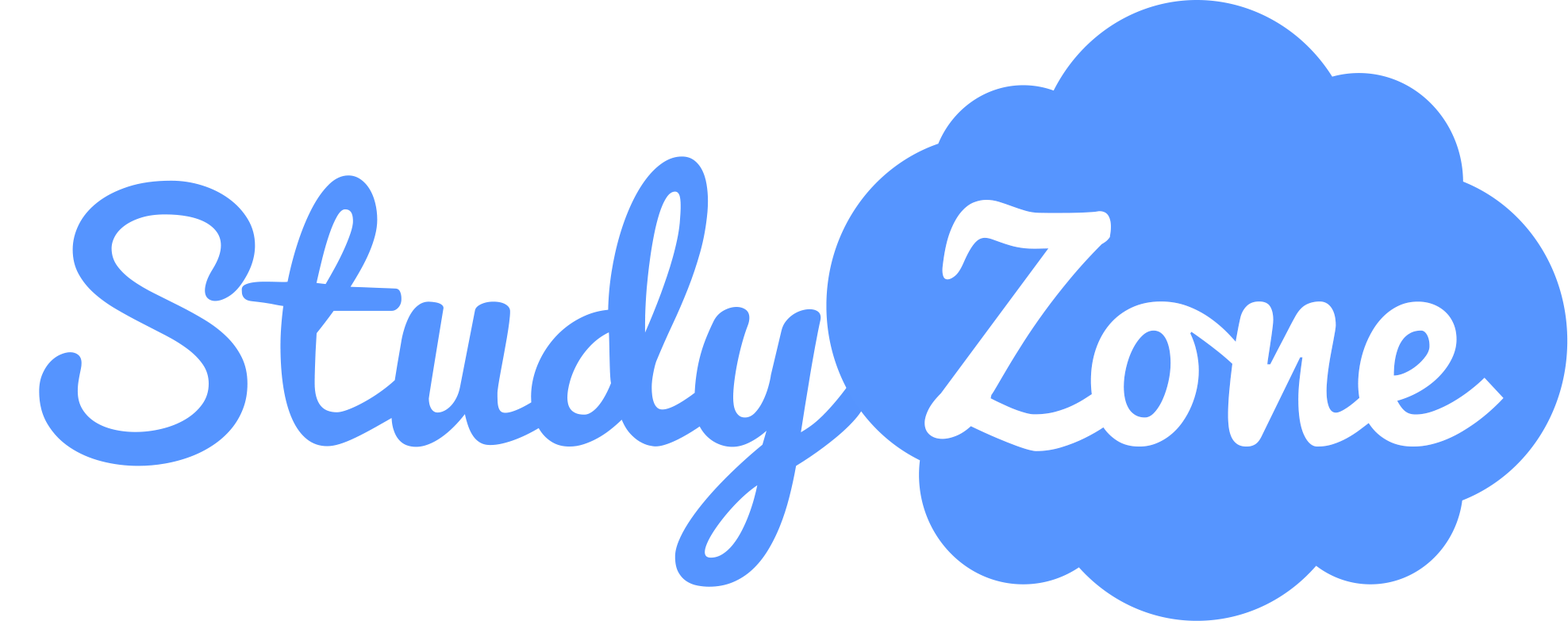
<style>
.page{position:relative;width:1568px;height:621px;background:#ffffff}
.page>*{position:absolute;margin:0}
.t1{font:309.2px "Pacifico-Regular";color:#5695ff}
.t2{font:309.2px "Pacifico-Regular";color:#ffffff;scale:0.97 1}
</style>
<div class="page">
<p class="t1" style="left:39px;top:156px;width:824px;height:431px">Study</p>
<p class="t2" style="left:924px;top:200px;width:580px;height:252px">Zone</p>
</div>
